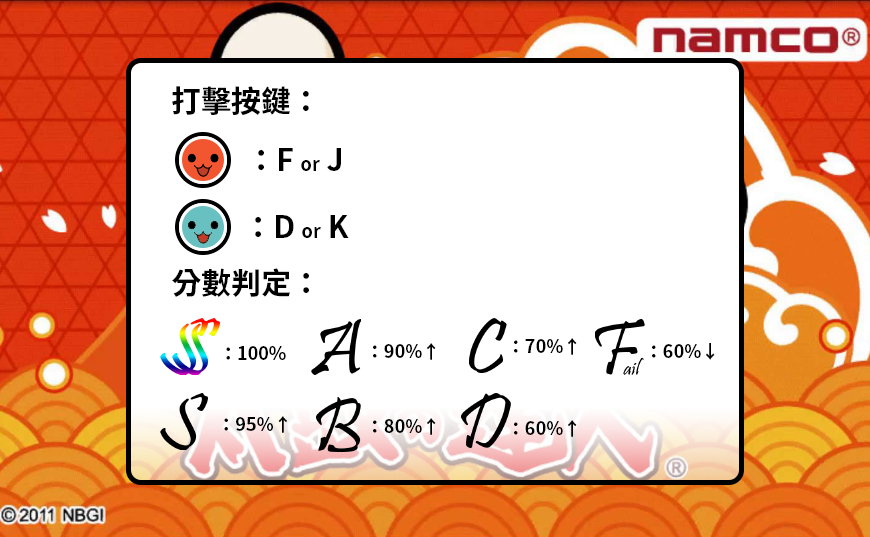
<style>
.page{position:relative;width:870px;height:537px;background:#ffffff}
.page>*{position:absolute;margin:0}
.t1{font:30px "NotoSansHant-Bold";color:#000000}
.t2{font:18px "NotoSansHant-Bold";color:#000000}
</style>
<div class="page">
<p class="t1" style="left:172px;top:86px;width:137px;height:29px">打擊按鍵：</p>
<p class="t1" style="left:258px;top:148px;width:83px;height:23px">：F <span class="t2">or</span> J</p>
<p class="t1" style="left:255px;top:215px;width:94px;height:23px">：D <span class="t2">or</span> K</p>
<p class="t1" style="left:172px;top:268px;width:137px;height:29px">分數判定：</p>
<p class="t2" style="left:514px;top:338px;width:63px;height:17px">：70%↑</p>
<p class="t2" style="left:226px;top:346px;width:60px;height:14px">：100%</p>
<p class="t2" style="left:373px;top:343px;width:63px;height:17px">：90%↑</p>
<p class="t2" style="left:652px;top:343px;width:63px;height:17px">：60%↓</p>
<p class="t2" style="left:224px;top:416px;width:63px;height:17px">：95%↑</p>
<p class="t2" style="left:373px;top:418px;width:63px;height:17px">：80%↑</p>
<p class="t2" style="left:514px;top:420px;width:63px;height:17px">：60%↑</p>
</div>
